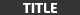
<style>
.page{position:relative;width:80px;height:15px;background:#333436}
.page>*{position:absolute;margin:0}
.t1{font:11px "HeadlineR-HM";letter-spacing:-0.02em;color:#ffffff}
</style>
<div class="page">
<p class="t1" style="left:23px;top:3px;width:34px;height:10px">TITLE</p>
</div>
